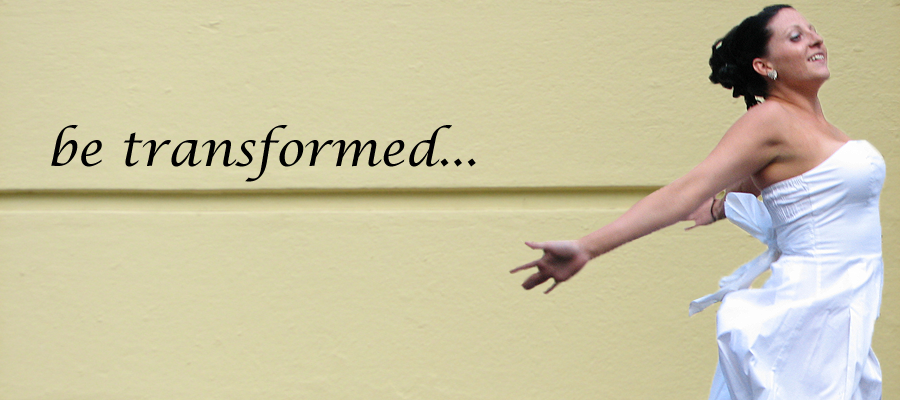
<style>
.page{position:relative;width:900px;height:400px}
.page>*{position:absolute;margin:0}
.t1{font:48px "LucidaCalligraphy-Italic";color:#000000}
</style>
<div class="page">
<p class="t1" style="left:51px;top:125px;width:425px;height:57px">be transformed...</p>
</div>
